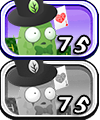
<style>
.page{position:relative;width:100px;height:120px}
.page>*{position:absolute;margin:0}
.t1{font:33px "FZSEK-Kelvin";color:#fefdfd}
.t2{font:33px "FZSEJW--GB1-0";color:#fefdfd}
</style>
<div class="page">
<p class="t1" style="left:59px;top:36px;width:30px;height:17px"><span class="t2">  </span>75</p>
</div>
